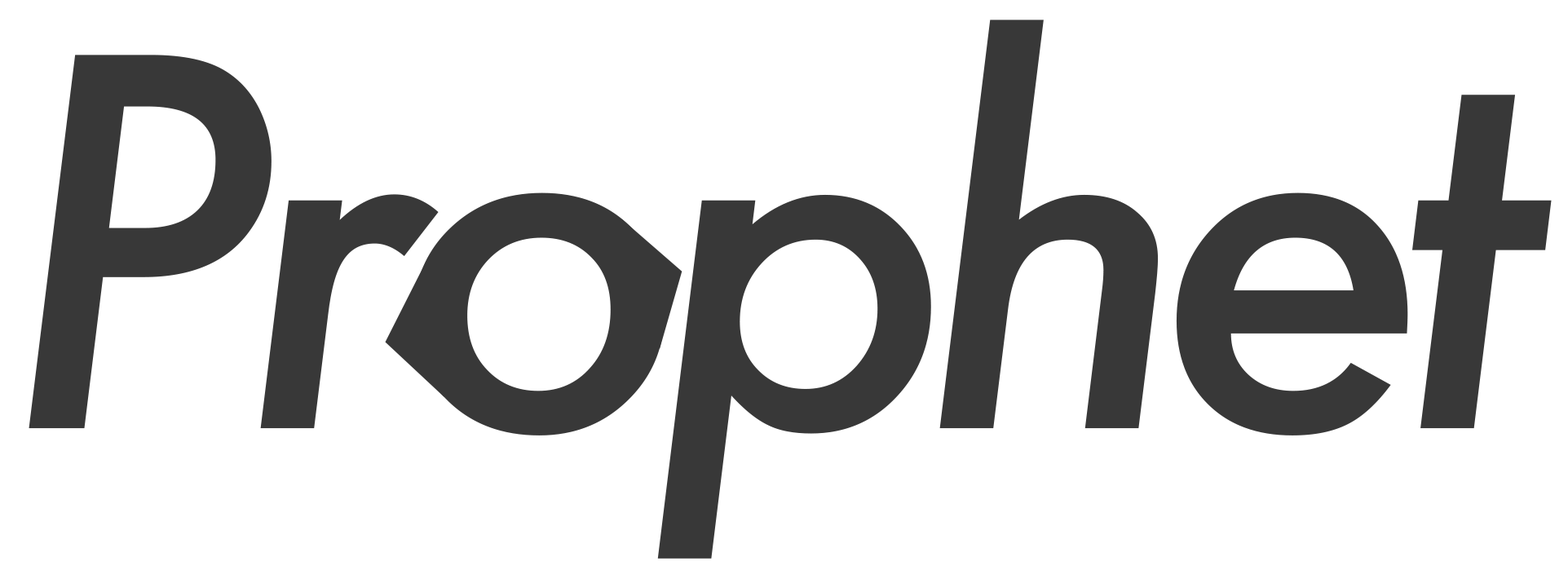
<style>
.page{position:relative;width:1568px;height:579px;background:#ffffff}
.page>*{position:absolute;margin:0}
.t1{font:495.1px "Futura-MediumItalic";letter-spacing:-0.075em;color:#383838}
</style>
<div class="page">
<p class="t1" style="left:29px;top:20px;width:1523px;height:539px">Prophet</p>
</div>
